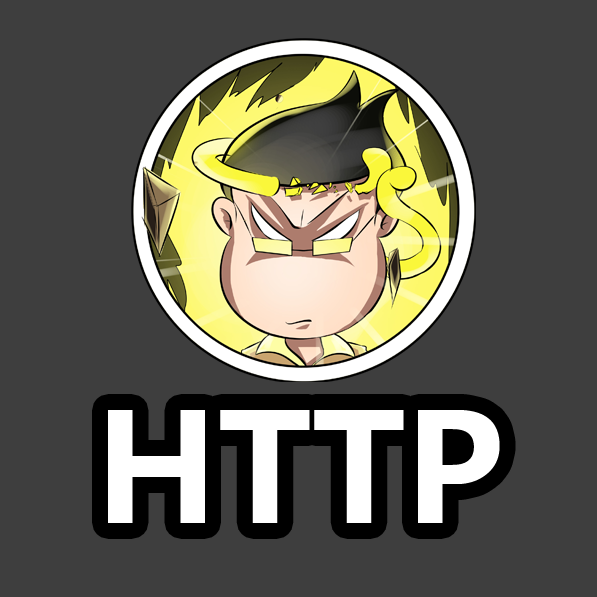
<style>
.page{position:relative;width:597px;height:597px;background:#3e3e3e}
.page>*{position:absolute;margin:0}
.t1{font:149.8px "MicrosoftYaHei-Bold";color:#ffffff}
</style>
<div class="page">
<p class="t1" style="left:108px;top:410px;width:392px;height:113px">HTTP</p>
</div>
